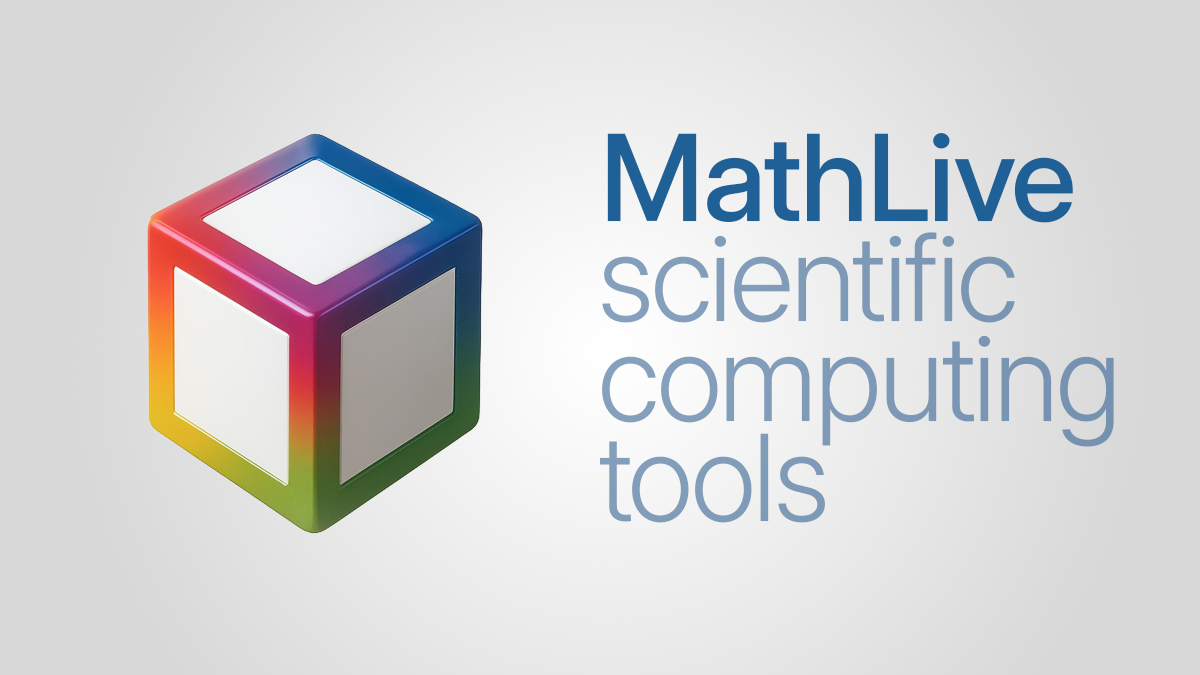
<style>
.page{position:relative;width:1200px;height:675px}
.page>*{position:absolute;margin:0}
.t1{font:120px "Inter-DisplayMedium";color:#1f6196}
.t2{font:120px/100px "Inter-DisplayLight";color:#7f9bb8}
.t3{font:120px/100px "Inter-DisplayMedium";color:#7f9bb8}
</style>
<div class="page">
<p class="t1" style="left:607px;top:133px;width:466px;height:90px">MathLive</p>
<p class="t2" style="left:600px;top:232px;width:514px;height:291px"><span class="t3"><br></span>scientific<br>computing<br>tools</p>
</div>
